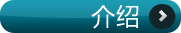
<style>
.page{position:relative;width:181px;height:33px}
.page>*{position:absolute;margin:0}
.t1{font:24px "MicrosoftYaHei";letter-spacing:0.03em;color:#ffffff;text-transform:uppercase}
</style>
<div class="page">
<p class="t1" style="left:91px;top:5px;width:48px;height:24px">介绍</p>
</div>
